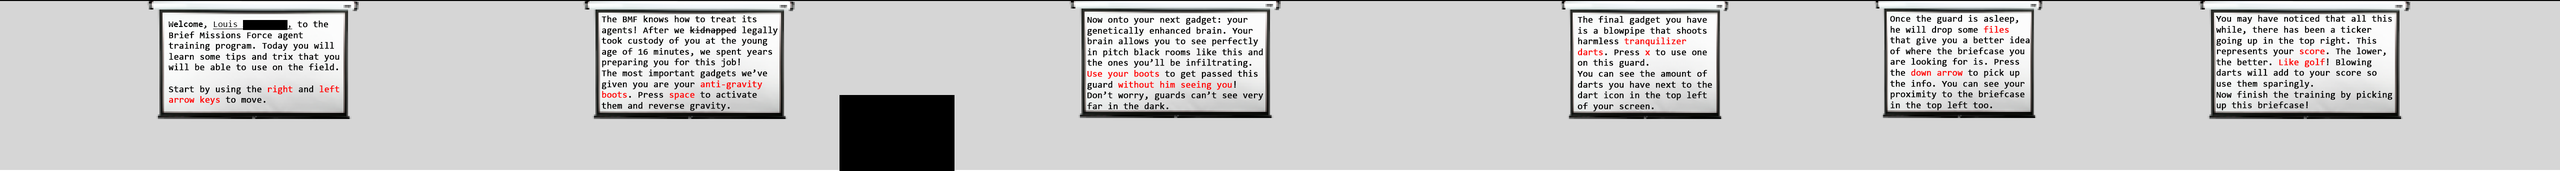
<style>
.page{position:relative;width:2560px;height:171px;background:#d6d6d6}
.page>*{position:absolute;margin:0}
.t1{font:9px "Consolas";color:#000000;font-weight:bold}
.t2{font:9px "Consolas";color:#ff0000;font-weight:bold}
.t3{font:9px "Consolas-Bold";color:#000000}
.t4{font:9px "Consolas";color:#000000;text-decoration:underline}
</style>
<div class="page">
<p class="t1" style="left:602px;top:16px;width:176px;height:95px">The BMF knows how to treat its<br>agents! After we kidnapped legally<br>took custody of you at the young <br>age of 16 minutes, we spent years <br>preparing you for this job!<br>The most important gadgets we’ve<br>given you are your <span class="t2">anti-gravity<br>boots</span>. Press <span class="t2">space </span>to activate <br>them and reverse gravity.</p>
<p class="t1" style="left:1087px;top:16px;width:177px;height:94px">Now onto your next gadget: your<br>genetically enhanced brain. Your<br>brain allows you to see perfectly<br>in pitch black rooms like this and<br>the ones you’ll be infiltrating.<br><span class="t2">Use your boots </span>to get passed this <br>guard <span class="t2">without him seeing you</span>! <br>Don’t worry, guards can’t see very<br>far in the dark.</p>
<p class="t1" style="left:1578px;top:16px;width:134px;height:96px">The final gadget you have<br>is a blowpipe that shoots <br>harmless <span class="t2">tranquilizer <br>darts</span>. Press <span class="t2">x </span>to use one<br>on this guard.<br>You can see the amount of<br>darts you have next to the<br>dart icon in the top left<br>of your screen.</p>
<p class="t1" style="left:1890px;top:15px;width:140px;height:95px">Once the guard is asleep,<br>he will drop some <span class="t2">files <br></span>that give you a better idea<br>of where the briefcase you <br>are looking for is. Press <br>the <span class="t2">down arrow </span>to pick up <br>the info. You can see your <br>proximity to the briefcase <br>in the top left too.</p>
<p class="t1" style="left:2216px;top:15px;width:176px;height:95px">You may have noticed that all this<br>while, there has been a ticker<br>going up in the top right. This<br>represents your <span class="t2">score</span>. The lower,<br>the better. <span class="t2">Like golf</span>! Blowing<br>darts will add to your score so <br>use them sparingly.<br>Now finish the training by picking<br>up this briefcase!</p>
<p class="t1" style="left:168px;top:20px;width:172px;height:85px"><span class="t3">Welcome, </span><span class="t4">Louis AppleBury, </span>to the <br>Brief Missions Force agent <br>training program. Today you will <br>learn some tips and trix that you<br>will be able to use on the field.<br><br>Start by using the <span class="t2">right </span>and <span class="t2">left<br>arrow keys </span>to move.</p>
</div>
